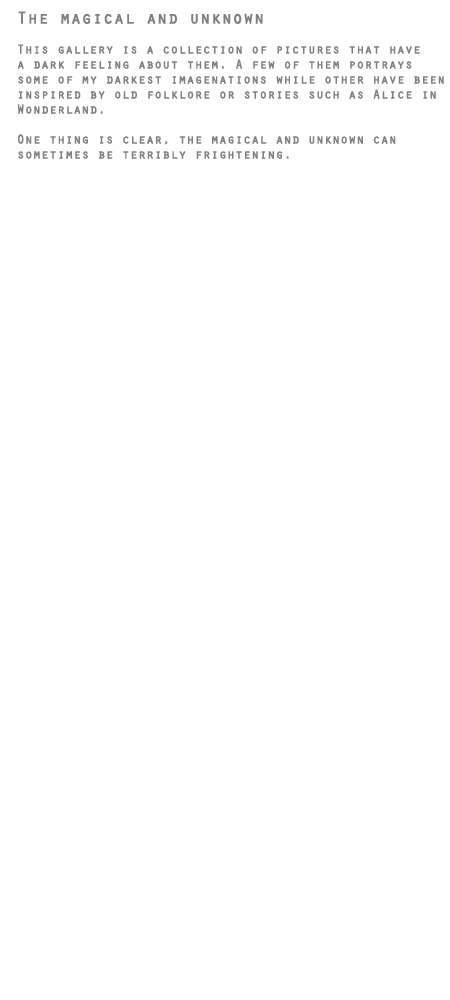
<style>
.page{position:relative;width:450px;height:1000px;background:#ffffff}
.page>*{position:absolute;margin:0}
.t1{font:12.5px "Orator-Regular";color:#7f7f7f;font-weight:bold}
.t2{font:16.7px "Orator-Regular";color:#7f7f7f;font-weight:bold}
</style>
<div class="page">
<p class="t1" style="left:17px;top:11px;width:427px;height:148px;text-align:right"><span class="t2">The magical and unknown<br></span><br>This gallery is a collection of pictures that have<br>a dark feeling about them. A few of them portrays<br>some of my darkest imagenations while other have been <br>inspired by old folklore or stories such as Alice in <br>Wonderland.<br><br>One thing is clear, the magical and unknown can <br>sometimes be terribly frightening.</p>
</div>
